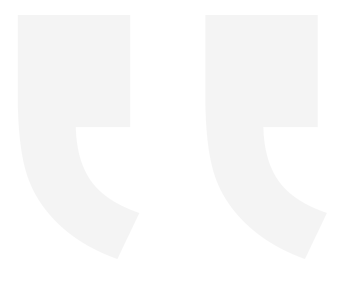
<style>
.page{position:relative;width:340px;height:290px;background:#ffffff}
.page>*{position:absolute;margin:0}
.t1{font:819px "Arial-BoldMT";color:#f4f4f4}
</style>
<div class="page">
<p class="t1" style="left:17px;top:15px;width:310px;height:244px">“</p>
</div>
